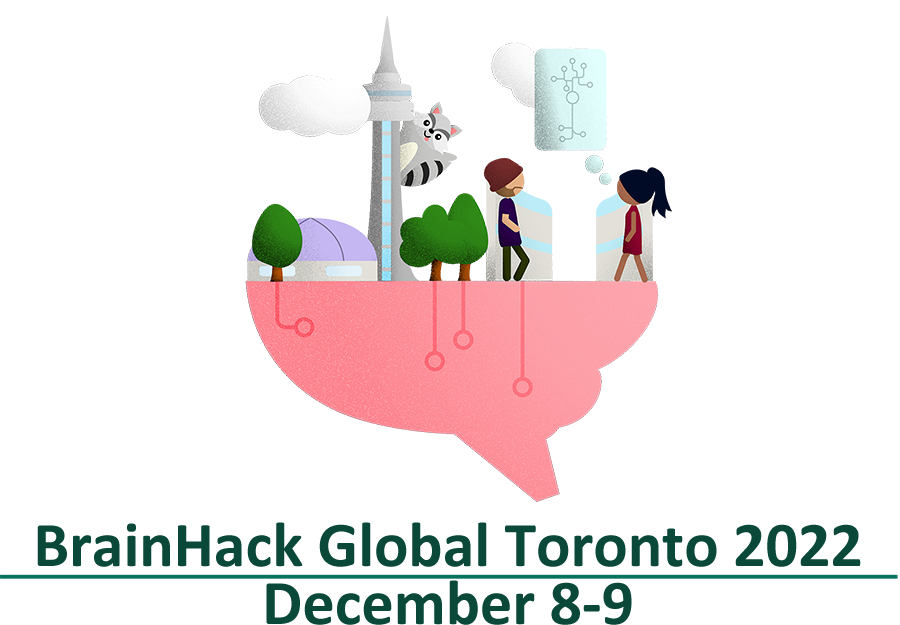
<style>
.page{position:relative;width:900px;height:625px;background:#ffffff}
.page>*{position:absolute;margin:0}
.t1{font:64px "Calibri-Bold";color:#0a4839}
</style>
<div class="page">
<p class="t1" style="left:37px;top:522px;width:824px;height:45px">BrainHack Global Toronto 2022</p>
<p class="t1" style="left:266px;top:580px;width:366px;height:45px">December 8-9</p>
</div>
